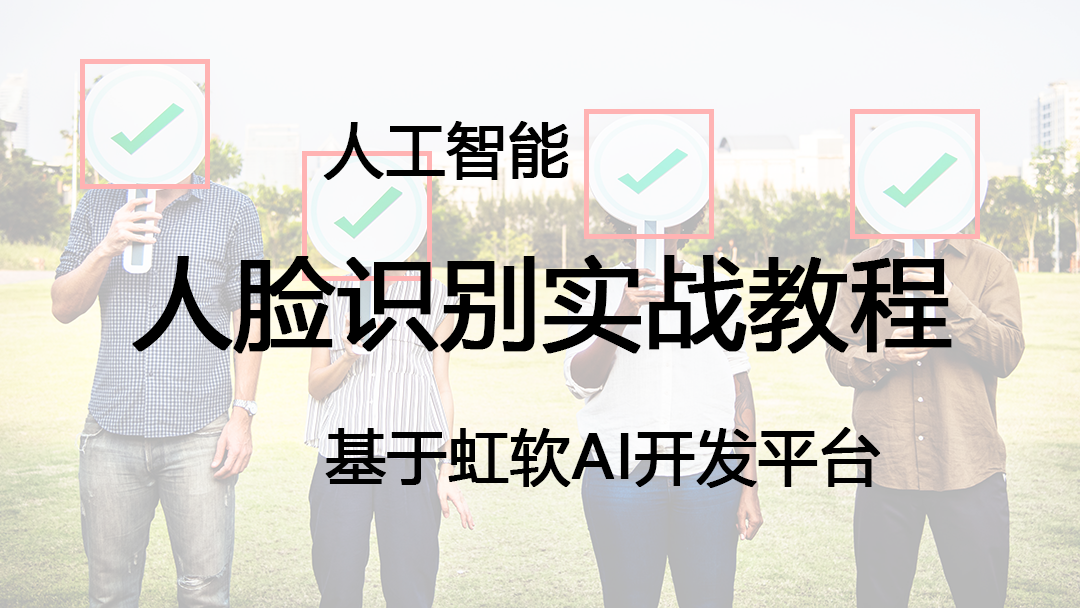
<style>
.page{position:relative;width:1080px;height:608px}
.page>*{position:absolute;margin:0}
.t1{font:60px "MicrosoftYaHei";color:#000000;font-weight:bold}
.t2{font:100px "MicrosoftYaHei";color:#000000;font-weight:bold}
</style>
<div class="page">
<p class="t1" style="left:323px;top:121px;width:246px;height:59px">人工智能</p>
<p class="t2" style="left:132px;top:255px;width:820px;height:99px">人脸识别实战教程</p>
<p class="t1" style="left:325px;top:427px;width:555px;height:61px">基于虹软AI开发平台</p>
</div>
